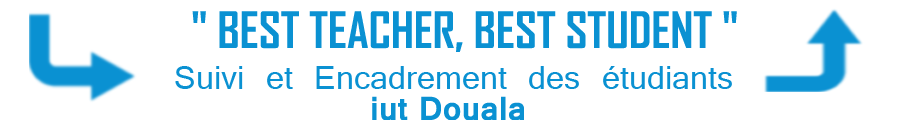
<style>
.page{position:relative;width:900px;height:120px;background:#ffffff}
.page>*{position:absolute;margin:0}
.t1{font:48px "AgencyFB-Bold";color:#0a91d2}
.t2{font:36px "Vrinda";color:#0a91d2}
.t3{font:36px "Vrinda-Bold";color:#0a91d2}
</style>
<div class="page">
<p class="t1" style="left:192px;top:11px;width:545px;height:41px">" BEST TEACHER, BEST STUDENT "</p>
<p class="t2" style="left:175px;top:66px;width:557px;height:23px">Suivi et Encadrement des étudiants</p>
<p class="t3" style="left:372px;top:96px;width:152px;height:25px">iut Douala</p>
</div>
